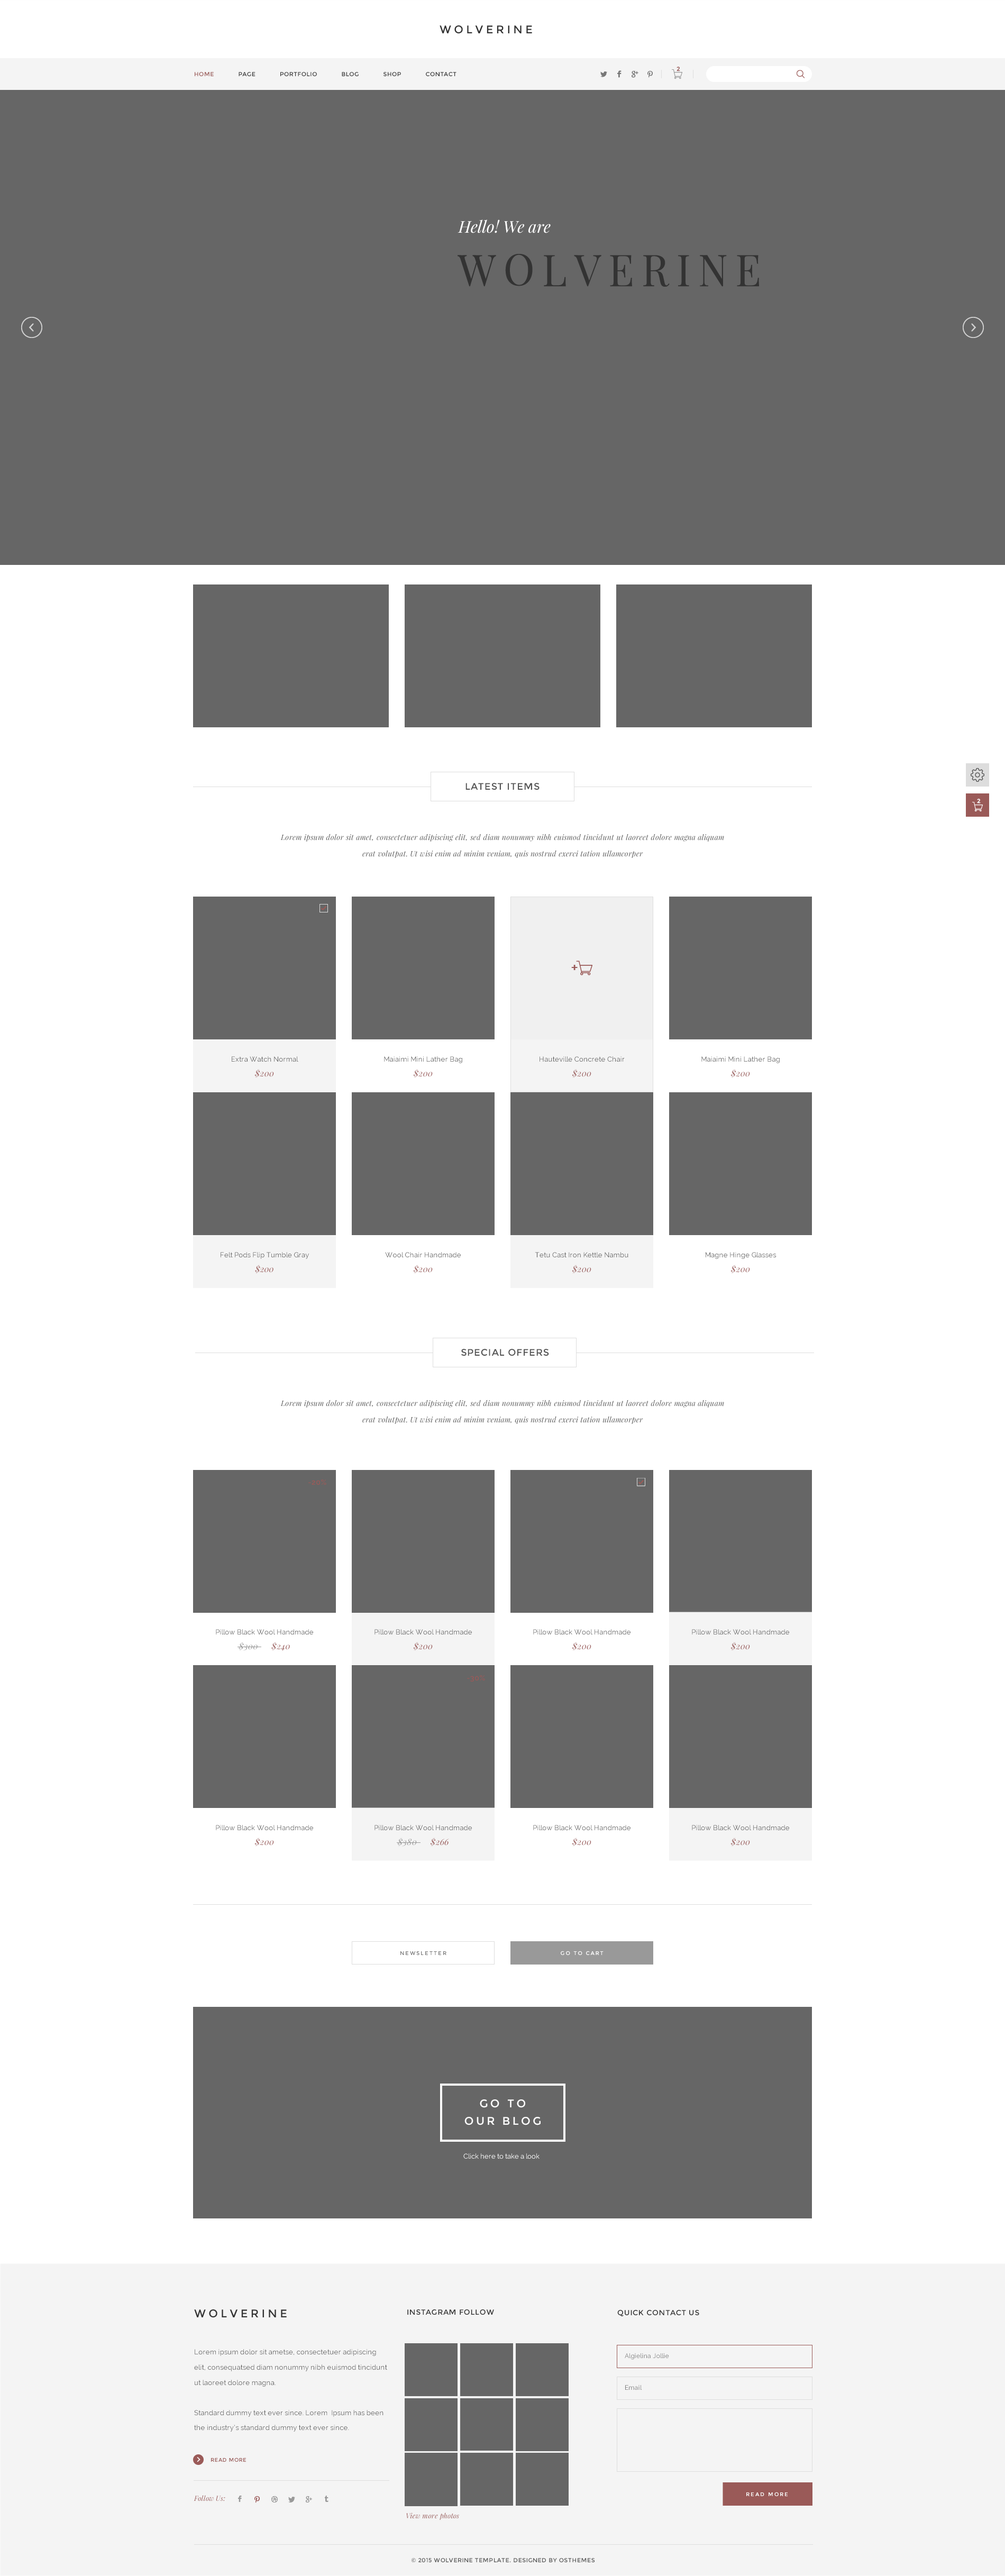
<style>
.page{position:relative;width:1005px;height:2576px;background:#ffffff}
.page>*{position:absolute;margin:0}
.t1{font:11.1px "Montserrat-Regular";color:#333333}
.t2{font:5.8px "Montserrat-Regular";letter-spacing:0.05em;color:#333333}
.t3{font:5.8px "Montserrat-Regular";letter-spacing:0.05em;color:#9b5a57}
.t4{font:5.8px "Montserrat-Regular";color:#9a5a58;font-weight:bold}
.t5{font:16.4px "PlayfairDisplay-Italic";color:#ffffff}
.t6{font:9.5px "Montserrat-Regular";letter-spacing:0.05em;color:#535353}
.t7{font:5.8px "Montserrat-Regular";color:#ffffff;font-weight:bold}
.t8{font:7.4px/16.3px "PlayfairDisplay-Italic";letter-spacing:0.02em;color:#555555}
.t9{font:6.9px "Raleway";letter-spacing:0.02em;color:#545454}
.t10{font:8.5px "PlayfairDisplay-Italic";letter-spacing:0.02em;color:#995958}
.t11{font:6.9px "Raleway";letter-spacing:0.02em;color:#535353}
.t12{font:8.5px "PlayfairDisplay-Italic";color:#995958}
.t13{font:7.4px "Raleway-SemiBold";letter-spacing:0.02em;color:#9a5a58}
.t14{font:6.9px "Raleway";letter-spacing:0.02em;color:#555555}
.t15{font:8.5px "PlayfairDisplay-Italic";letter-spacing:0.02em;color:#999999}
.t16{font:7.4px "Raleway-SemiBold";letter-spacing:0.02em;color:#995958}
.t17{font:5.3px "Montserrat-Regular";letter-spacing:0.2em;color:#777777}
.t18{font:5.3px "Montserrat-Regular";letter-spacing:0.2em;color:#ffffff}
.t19{font:11.1px/17.8px "Montserrat-Regular";letter-spacing:0.2em;color:#ffffff}
.t20{font:6.9px "Raleway";color:#ffffff}
.t21{font:7.4px "Montserrat-Regular";letter-spacing:0.05em;color:#333333}
.t22{font:6.9px/15.1px "Raleway";letter-spacing:0.02em;color:#555555}
.t23{font:6.3px "Raleway";letter-spacing:0.02em;color:#777777}
.t24{font:5.3px "Montserrat-Regular";letter-spacing:0.05em;color:#9a5a58}
.t25{font:6.9px "PlayfairDisplay-Italic";letter-spacing:0.02em;color:#995958}
.t26{font:6.9px "PlayfairDisplay-Italic";letter-spacing:0.02em;color:#9a5a58}
.t27{font:5.8px "Montserrat-Regular";letter-spacing:0.05em;color:#545454}
</style>
<div class="page">
<p class="t1" style="left:440px;top:25px;width:92px;height:9px">WOLVERINE</p>
<p class="t2" style="left:195px;top:72px;width:261px;height:4px"><span class="t3">HOME</span>      PAGE      PORTFOLIO      BLOG      SHOP      CONTACT</p>
<p class="t4" style="left:677px;top:67px;width:3px;height:4px">2</p>
<p class="t5" style="left:458px;top:220px;width:93px;height:13px">Hello! We are</p>
<p class="t6" style="left:465px;top:783px;width:75px;height:7px">LATEST ITEMS</p>
<p class="t7" style="left:977px;top:799px;width:4px;height:4px">2</p>
<p class="t8" style="left:280px;top:834px;width:444px;height:24px;text-align:center">Lorem ipsum dolor sit amet, consectetuer adipiscing elit, sed diam nonummy nibh euismod tincidunt ut laoreet dolore magna aliquam erat volutpat. Ut wisi enim ad minim veniam, quis nostrud exerci tation ullamcorper</p>
<p class="t9" style="left:232px;top:1056px;width:66px;height:6px">Extra Watch Normal</p>
<p class="t9" style="left:384px;top:1056px;width:78px;height:7px">Maiaimi Mini Lather Bag</p>
<p class="t9" style="left:540px;top:1056px;width:85px;height:6px">Hauteville Concrete Chair</p>
<p class="t9" style="left:701px;top:1056px;width:79px;height:7px">Maiaimi Mini Lather Bag</p>
<p class="t10" style="left:255px;top:1069px;width:19px;height:9px">$200</p>
<p class="t10" style="left:414px;top:1069px;width:19px;height:9px">$200</p>
<p class="t10" style="left:572px;top:1069px;width:19px;height:9px">$200</p>
<p class="t10" style="left:731px;top:1069px;width:19px;height:9px">$200</p>
<p class="t9" style="left:221px;top:1252px;width:88px;height:7px">Felt Pods Flip Tumble Gray</p>
<p class="t11" style="left:385px;top:1252px;width:76px;height:6px">Wool Chair Handmade</p>
<p class="t9" style="left:535px;top:1252px;width:93px;height:6px">Tetu Cast Iron Kettle Nambu</p>
<p class="t9" style="left:706px;top:1252px;width:70px;height:7px">Magne Hinge Glasses</p>
<p class="t12" style="left:255px;top:1265px;width:18px;height:9px">$200</p>
<p class="t10" style="left:414px;top:1265px;width:19px;height:9px">$200</p>
<p class="t10" style="left:572px;top:1265px;width:19px;height:9px">$200</p>
<p class="t10" style="left:731px;top:1265px;width:19px;height:9px">$200</p>
<p class="t6" style="left:461px;top:1349px;width:88px;height:7px">SPECIAL OFFERS</p>
<p class="t8" style="left:280px;top:1400px;width:444px;height:24px;text-align:center">Lorem ipsum dolor sit amet, consectetuer adipiscing elit, sed diam nonummy nibh euismod tincidunt ut laoreet dolore magna aliquam erat volutpat. Ut wisi enim ad minim veniam, quis nostrud exerci tation ullamcorper</p>
<p class="t13" style="left:308px;top:1479px;width:18px;height:6px">-20%</p>
<p class="t9" style="left:216px;top:1629px;width:97px;height:6px">Pillow Black Wool Handmade</p>
<p class="t14" style="left:374px;top:1629px;width:98px;height:6px">Pillow Black Wool Handmade</p>
<p class="t14" style="left:533px;top:1629px;width:98px;height:6px">Pillow Black Wool Handmade</p>
<p class="t14" style="left:692px;top:1629px;width:97px;height:6px">Pillow Black Wool Handmade</p>
<p class="t15" style="left:239px;top:1642px;width:51px;height:9px">$300<span class="t10">      $240</span></p>
<p class="t10" style="left:414px;top:1642px;width:19px;height:9px">$200</p>
<p class="t10" style="left:572px;top:1642px;width:19px;height:9px">$200</p>
<p class="t10" style="left:731px;top:1642px;width:19px;height:9px">$200</p>
<p class="t16" style="left:467px;top:1675px;width:18px;height:7px">-30%</p>
<p class="t14" style="left:216px;top:1825px;width:97px;height:6px">Pillow Black Wool Handmade</p>
<p class="t14" style="left:374px;top:1825px;width:98px;height:6px">Pillow Black Wool Handmade</p>
<p class="t14" style="left:533px;top:1825px;width:98px;height:6px">Pillow Black Wool Handmade</p>
<p class="t14" style="left:692px;top:1825px;width:97px;height:6px">Pillow Black Wool Handmade</p>
<p class="t10" style="left:255px;top:1838px;width:19px;height:9px">$200</p>
<p class="t15" style="left:398px;top:1838px;width:51px;height:9px">$380<span class="t10">      $266</span></p>
<p class="t10" style="left:572px;top:1838px;width:19px;height:9px">$200</p>
<p class="t10" style="left:731px;top:1838px;width:19px;height:9px">$200</p>
<p class="t17" style="left:400px;top:1951px;width:46px;height:4px">NEWSLETTER</p>
<p class="t18" style="left:561px;top:1951px;width:43px;height:4px">GO TO CART</p>
<p class="t19" style="left:464px;top:2099px;width:77px;height:26px;text-align:center">GO TO<br>OUR BLOG</p>
<p class="t20" style="left:463px;top:2153px;width:77px;height:6px">Click here to take a look</p>
<p class="t1" style="left:194px;top:2309px;width:93px;height:9px">WOLVERINE</p>
<p class="t21" style="left:407px;top:2309px;width:87px;height:6px">INSTAGRAM FOLLOW</p>
<p class="t21" style="left:617px;top:2310px;width:82px;height:6px">QUICK CONTACT US</p>
<p class="t22" style="left:194px;top:2349px;width:193px;height:83px">Lorem ipsum dolor sit ametse, consectetuer adipiscing elit, consequatsed diam nonummy nibh euismod tincidunt  ut laoreet dolore magna.<br> <br>Standard dummy text ever since. Lorem  Ipsum has been the industry’s standard dummy text ever since.</p>
<p class="t23" style="left:625px;top:2353px;width:44px;height:7px">Algielina Jollie</p>
<p class="t23" style="left:625px;top:2385px;width:17px;height:5px">Email</p>
<p class="t24" style="left:211px;top:2458px;width:35px;height:4px">READ MORE</p>
<p class="t25" style="left:194px;top:2495px;width:31px;height:6px">Follow Us:</p>
<p class="t18" style="left:746px;top:2492px;width:42px;height:4px">READ MORE</p>
<p class="t26" style="left:406px;top:2513px;width:53px;height:7px">View more photos</p>
<p class="t27" style="left:411px;top:2558px;width:184px;height:5px">© 2015 WOLVERINE TEMPLATE. DESIGNED BY OSTHEMES</p>
</div>
